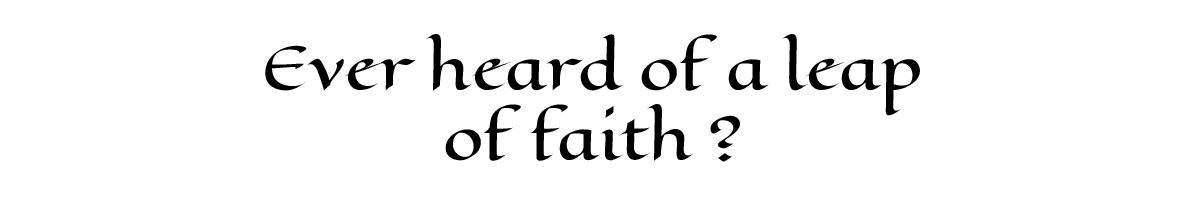
<style>
.page{position:relative;width:1179px;height:212px;background:#ffffff}
.page>*{position:absolute;margin:0}
.t1{font:58.3px "EagleLake-Regular";color:#000000}
</style>
<div class="page">
<p class="t1" style="left:265px;top:34px;width:655px;height:128px;text-align:center">Ever heard of a leap<br>of faith ?</p>
</div>
